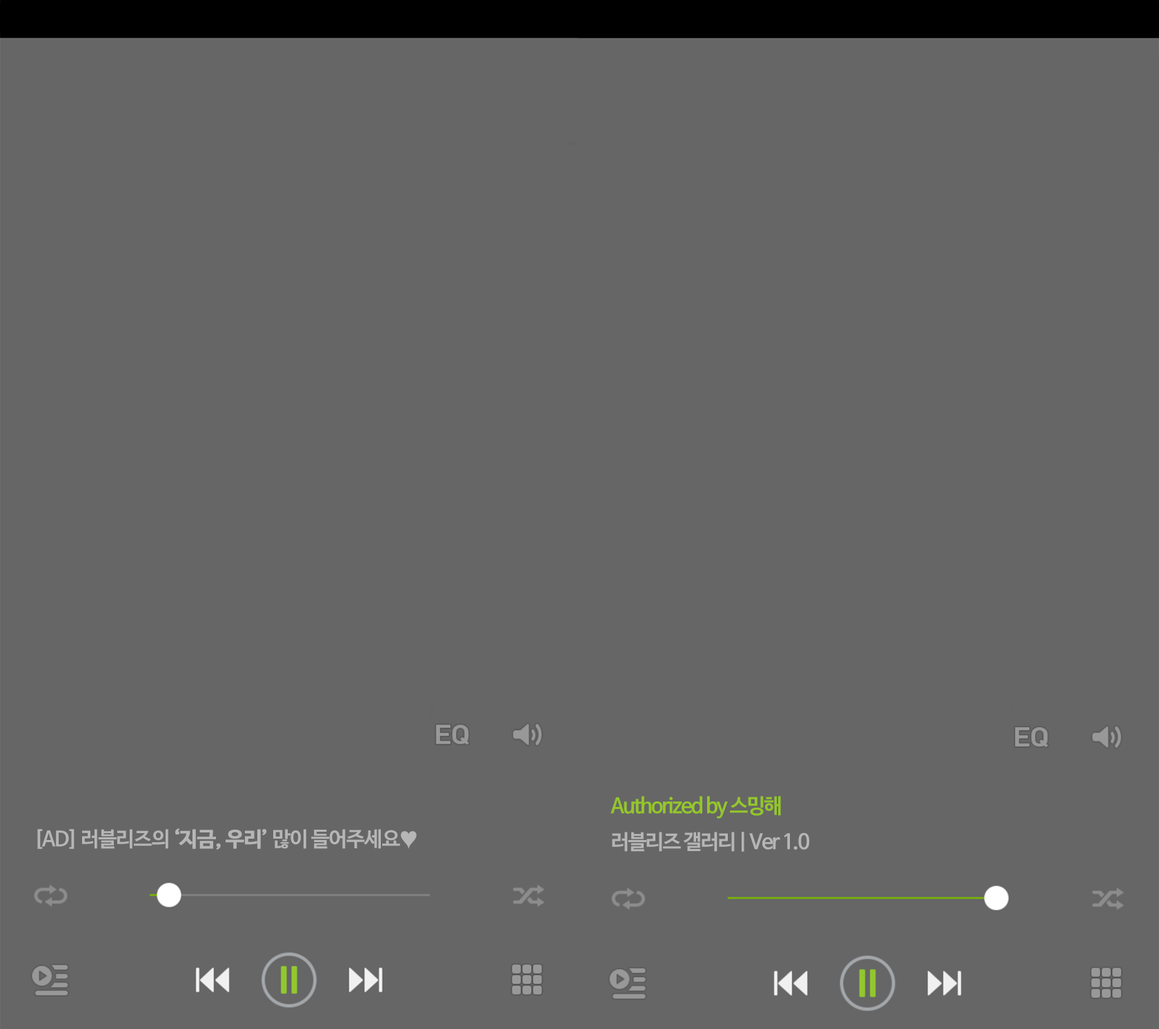
<style>
.page{position:relative;width:1159px;height:1029px;background:#666666}
.page>*{position:absolute;margin:0}
.t1{font:20.7px/35.9px "NanumBarunGothicBold";letter-spacing:-0.04em;color:#666666}
.t2{font:20.7px/35.9px "NanumBarunGothicBold";letter-spacing:-0.04em;color:#b5b6b5}
.t3{font:20.7px/35.9px "NanumBarunGothicBold";letter-spacing:-0.04em;color:#b5b6b5;font-weight:bold}
.t4{font:20.7px/35.9px "NanumBarunGothicBold";letter-spacing:-0.06em;color:#b5b6b5}
.t5{font:20.7px/35.9px "NanumBarunGothicBold";letter-spacing:-0.06em;color:#94c729}
</style>
<div class="page">
<p class="t1" style="left:34px;top:793px;width:383px;height:57px">태풍 (The Eye) - 인피니트<br><span class="t2">[AD] 러블리즈의 </span><span class="t3">‘지금, 우리’ </span><span class="t2">많이 들어주세요♥</span></p>
<p class="t4" style="left:610px;top:796px;width:199px;height:56px"><span class="t5">Authorized by 스밍해<br></span>러블리즈 갤러리 | Ver 1.0</p>
</div>
